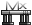
<style>
.page{position:relative;width:32px;height:25px;background:#ffffff}
.page>*{position:absolute;margin:0}
.t1{font:10.6px "Michroma"}
</style>
<div class="page">
<p class="t1" style="left:6px;top:1px;width:13px;height:9px">M</p>
<p class="t1" style="left:19px;top:3px;width:8px;height:6px">x</p>
</div>
